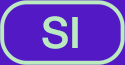
<style>
.page{position:relative;width:125px;height:65px;background:#5219c4}
.page>*{position:absolute;margin:0}
.t1{font:43.5px "HelveticaNeue-Medium";color:#bceac0}
</style>
<div class="page">
<p class="t1" style="left:42px;top:16px;width:36px;height:33px">SI</p>
</div>
